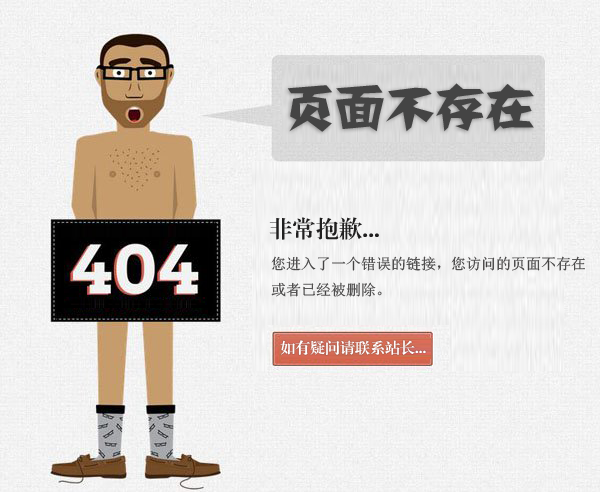
<style>
.page{position:relative;width:600px;height:492px}
.page>*{position:absolute;margin:0}
.t1{font:50px "FZJZK--GBK1-0";color:#444444}
.t2{font:23.3px "FZXBSJW--GB1-0";color:#201f1f}
.t3{font:15px "SimSun";color:#444343}
.t4{font:15px "FZXBSJW--GB1-0";color:#ffffff}
</style>
<div class="page">
<p class="t1" style="left:287px;top:83px;width:247px;height:49px">页面不存在</p>
<p class="t2" style="left:269px;top:217px;width:110px;height:23px">非常抱歉...</p>
<p class="t3" style="left:271px;top:256px;width:314px;height:41px">您进入了一个错误的链接，您访问的页面不存在或者已经被删除。</p>
<p class="t4" style="left:280px;top:340px;width:146px;height:15px">如有疑问请联系站长...</p>
</div>
